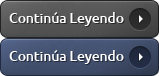
<style>
.page{position:relative;width:159px;height:76px}
.page>*{position:absolute;margin:0}
.t1{font:14px "Ubuntu-Medium";letter-spacing:-0.01em;color:#ffffff}
</style>
<div class="page">
<p class="t1" style="left:9px;top:12px;width:115px;height:14px">Continúa Leyendo</p>
<p class="t1" style="left:9px;top:50px;width:115px;height:14px">Continúa Leyendo</p>
</div>
